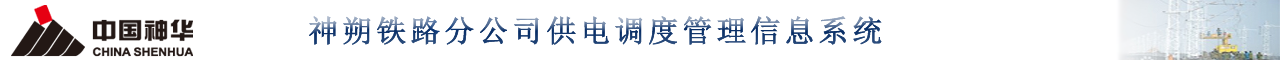
<style>
.page{position:relative;width:1280px;height:60px;background:#ffffff}
.page>*{position:absolute;margin:0}
.t1{font:30px "NSimSun";letter-spacing:0.1em;font-weight:bold}
</style>
<div class="page">
<p class="t1" style="left:309px;top:16px;width:573px;height:29px">神朔铁路分公司供电调度管理信息系统</p>
</div>
